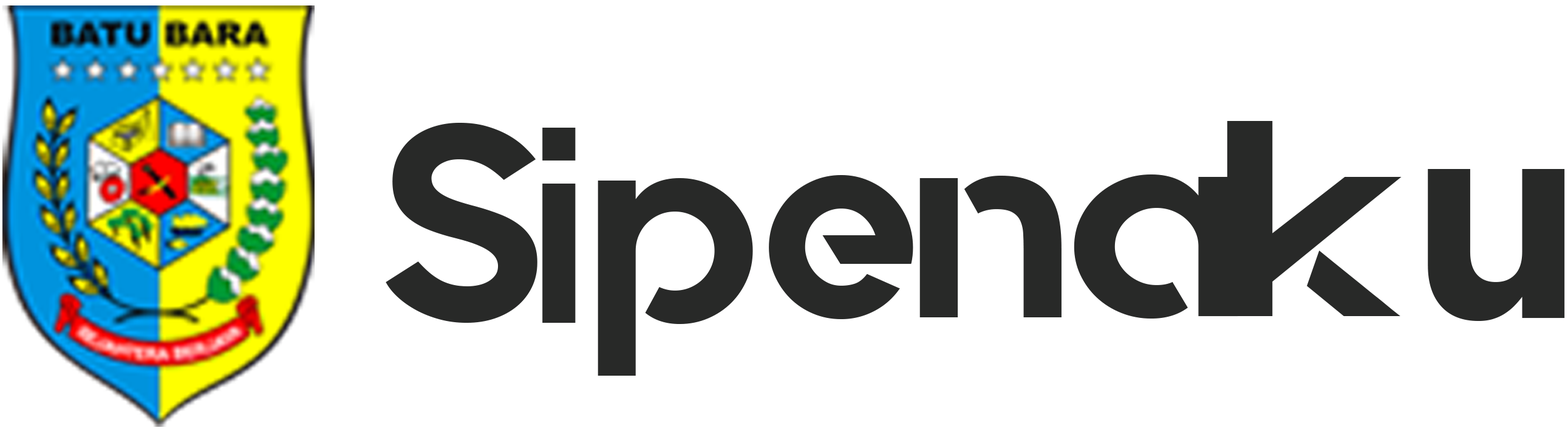
<style>
.page{position:relative;width:1568px;height:431px;background:#ffffff}
.page>*{position:absolute;margin:0}
.t1{font:278.4px "Quantify";color:#282928}
.t2{font:278.4px "Quantify";color:#282928;scale:1.23 1}
.t3{font:278.4px "Quantify";color:#282928;scale:0.89 1}
.t4{font:278.4px "Gotham-Bold";color:#282928}
.t5{font:278.4px "Quantify";color:#282928;scale:1.07 1}
</style>
<div class="page">
<p class="t1" style="left:386px;top:123px;width:151px;height:199px">S</p>
<p class="t2" style="left:1227px;top:121px;width:175px;height:195px">k</p>
<p class="t3" style="left:542px;top:128px;width:34px;height:194px">i</p>
<p class="t4" style="left:1428px;top:169px;width:137px;height:152px">u</p>
<p class="t1" style="left:598px;top:178px;width:155px;height:197px">p</p>
<p class="t1" style="left:769px;top:175px;width:144px;height:144px">e</p>
<p class="t1" style="left:919px;top:176px;width:143px;height:141px">n</p>
<p class="t5" style="left:1074px;top:174px;width:164px;height:144px">a</p>
</div>
